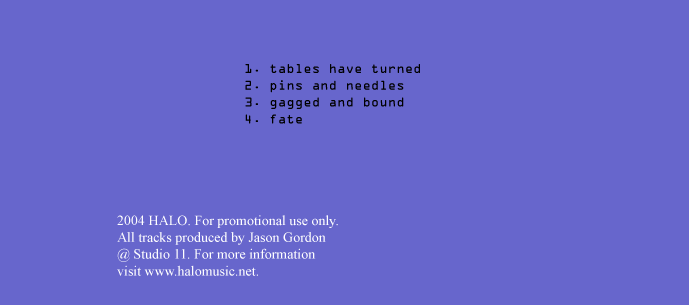
<style>
.page{position:relative;width:689px;height:305px;background:#6766cc}
.page>*{position:absolute;margin:0}
.t1{font:14px "OCRAExtended";color:#000000}
.t2{font:14px "TimesNewRomanPSMT";color:#ffffff}
</style>
<div class="page">
<p class="t1" style="left:245px;top:64px;width:175px;height:60px;text-align:justify">1. tables have turned<br>2. pins and needles<br>3. gagged and bound<br>4. fate</p>
<p class="t2" style="left:117px;top:215px;width:221px;height:61px;text-align:justify">2004 HALO. For promotional use only. <br>All tracks produced by Jason Gordon<br>@ Studio 11. For more information <br>visit www.halomusic.net.</p>
</div>
